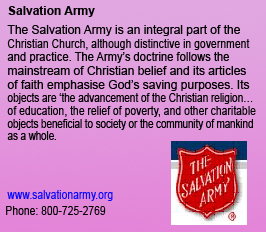
<style>
.page{position:relative;width:266px;height:232px}
.page>*{position:absolute;margin:0}
.t1{font:12px "Arial-BoldMT";color:#000000}
.t2{font:12px "ArialMT";color:#000000}
.t3{font:12px "ArialMT";color:#000000;scale:0.87 1}
.t4{font:12px "ArialMT";color:#000000;scale:0.93 1}
.t5{font:12px "ArialMT";color:#000000;scale:0.83 1}
.t6{font:12px "ArialMT";color:#000000;scale:0.81 1}
.t7{font:12px "ArialMT";color:#0b0bf9;scale:0.86 1}
.t8{font:12px "ArialMT";color:#000000;scale:0.86 1}
</style>
<div class="page">
<p class="t1" style="left:8px;top:6px;width:87px;height:11px">Salvation Army</p>
<p class="t2" style="left:7px;top:25px;width:233px;height:11px">The Salvation Army is an integral part of the</p>
<p class="t3" style="left:7px;top:39px;width:243px;height:11px">Christian Church, although distinctive in government</p>
<p class="t4" style="left:7px;top:52px;width:222px;height:11px">and practice. The Army’s doctrine follows the</p>
<p class="t2" style="left:8px;top:66px;width:238px;height:9px">mainstream of Christian belief and its articles</p>
<p class="t2" style="left:7px;top:80px;width:243px;height:11px">of faith emphasise God’s saving purposes. Its</p>
<p class="t5" style="left:7px;top:93px;width:246px;height:11px">objects are ‘the advancement of the Christian religion…</p>
<p class="t3" style="left:7px;top:106px;width:249px;height:11px">of education, the relief of poverty, and other charitable</p>
<p class="t6" style="left:7px;top:119px;width:246px;height:11px">objects beneficial to society or the community of mankind</p>
<p class="t6" style="left:7px;top:131px;width:49px;height:9px">as a whole.</p>
<p class="t7" style="left:7px;top:190px;width:106px;height:11px">www.salvationarmy.org</p>
<p class="t8" style="left:6px;top:206px;width:100px;height:9px">Phone: 800-725-2769</p>
</div>
